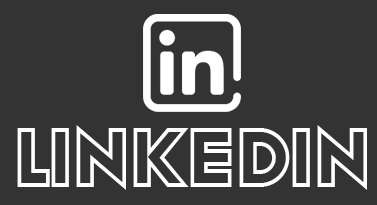
<style>
.page{position:relative;width:377px;height:205px;background:#333333}
.page>*{position:absolute;margin:0}
.t1{font:85px "Avalon-Regular";color:#ffffff}
</style>
<div class="page">
<p class="t1" style="left:17px;top:125px;width:350px;height:65px">Linkedin</p>
</div>
